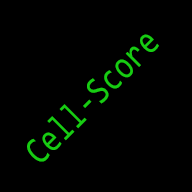
<style>
.page{position:relative;width:192px;height:192px;background:#000000}
.page>*{position:absolute;margin:0}
.t1{font:38.4px "Consolas";letter-spacing:0.02em;color:#18cc13;scale:0.79 1}
</style>
<div class="page">
<p class="t1" style="left:27px;top:34px;width:132px;height:128px;rotate:-45deg">Cell-Score</p>
</div>
